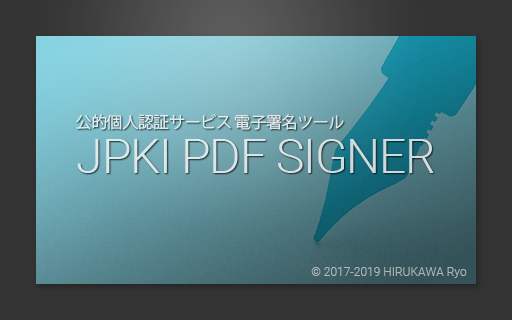
<style>
.page{position:relative;width:512px;height:320px;background:#333333}
.page>*{position:absolute;margin:0}
.t1{font:16px "KozGoPr6N-Regular";letter-spacing:-0.025em;color:#deebed}
.t2{font:48px "Roboto-Light";letter-spacing:-0.025em;color:#dae5e7}
.t3{font:12px "Roboto-Light";color:#afb8ba}
</style>
<div class="page">
<p class="t1" style="left:76px;top:114px;width:268px;height:16px">公的個人認証サービス 電子署名ツール</p>
<p class="t2" style="left:77px;top:139px;width:357px;height:34px">JPKI PDF SIGNER</p>
<p class="t3" style="left:311px;top:267px;width:156px;height:11px">© 2017-2019 HIRUKAWA Ryo</p>
</div>
